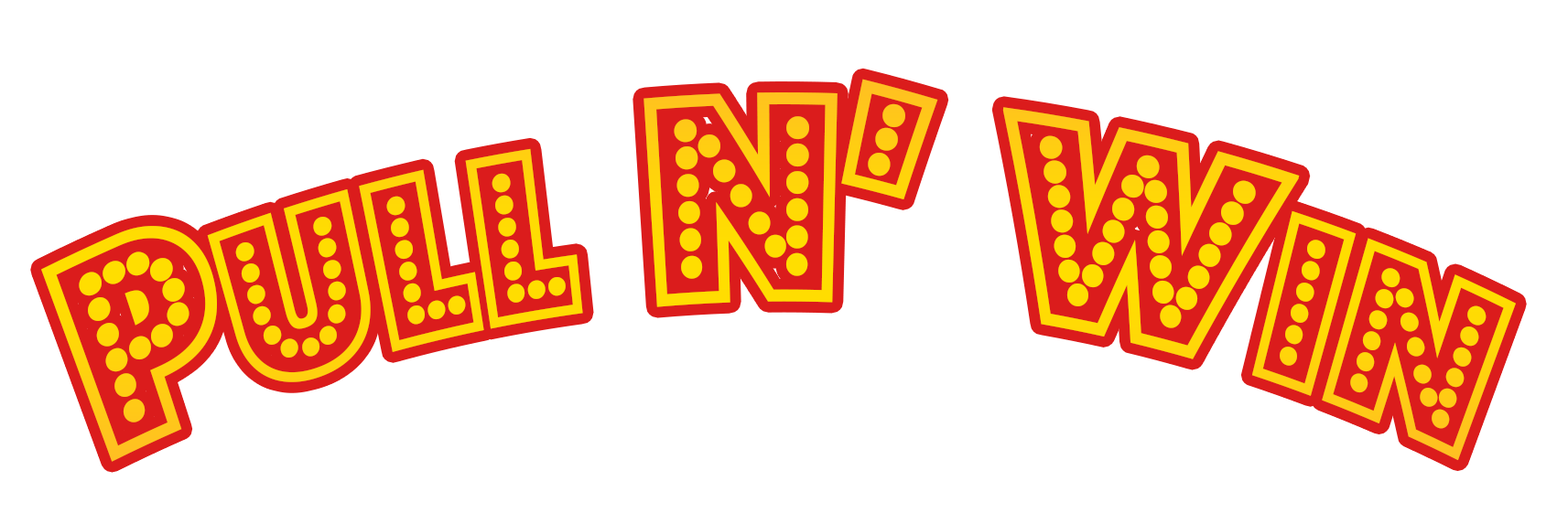
<style>
.page{position:relative;width:1568px;height:524px;background:#ffffff}
.page>*{position:absolute;margin:0}
.t1{font:294.3px "BudmoJigglish-Regular";color:#ffda05;scale:0.86 1}
.t2{font:240.8px "BudmoJigglish-Regular";color:#ffda05;scale:0.86 1}
</style>
<div class="page">
<p class="t1" style="left:41px;top:79px;width:1475px;height:383px">P<span class="t2">ULL </span>n’ W<span class="t2">IN</span></p>
</div>
